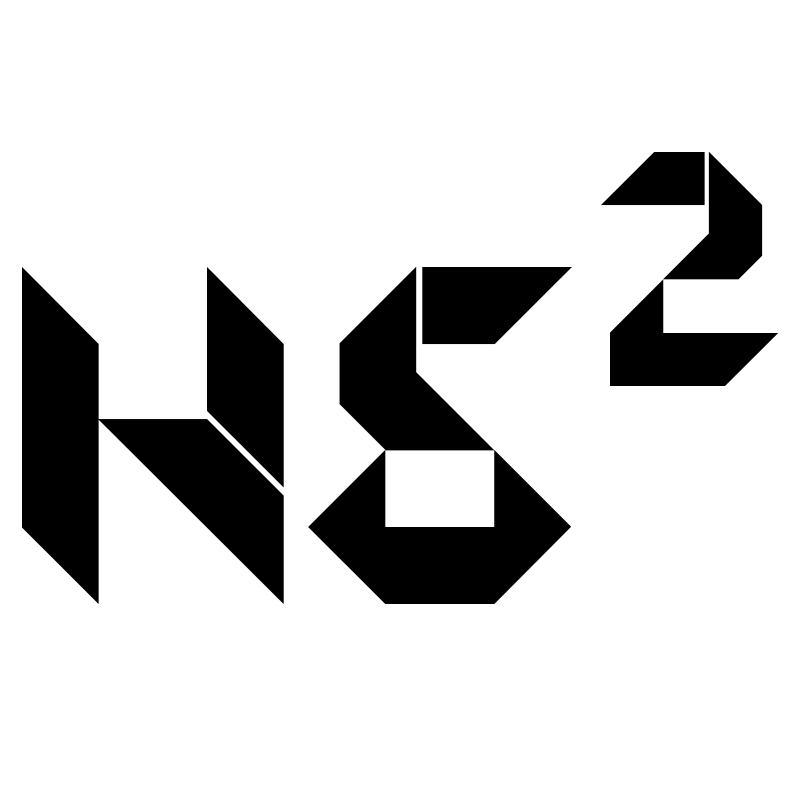
<style>
.page{position:relative;width:800px;height:800px;background:#ffffff}
.page>*{position:absolute;margin:0}
.t1{font:356.5px "Origami";color:#000000}
.t2{font:513.7px "Origami";color:#000000}
</style>
<div class="page">
<p class="t1" style="left:601px;top:151px;width:178px;height:235px">2</p>
<p class="t2" style="left:22px;top:266px;width:550px;height:338px">hs</p>
</div>
